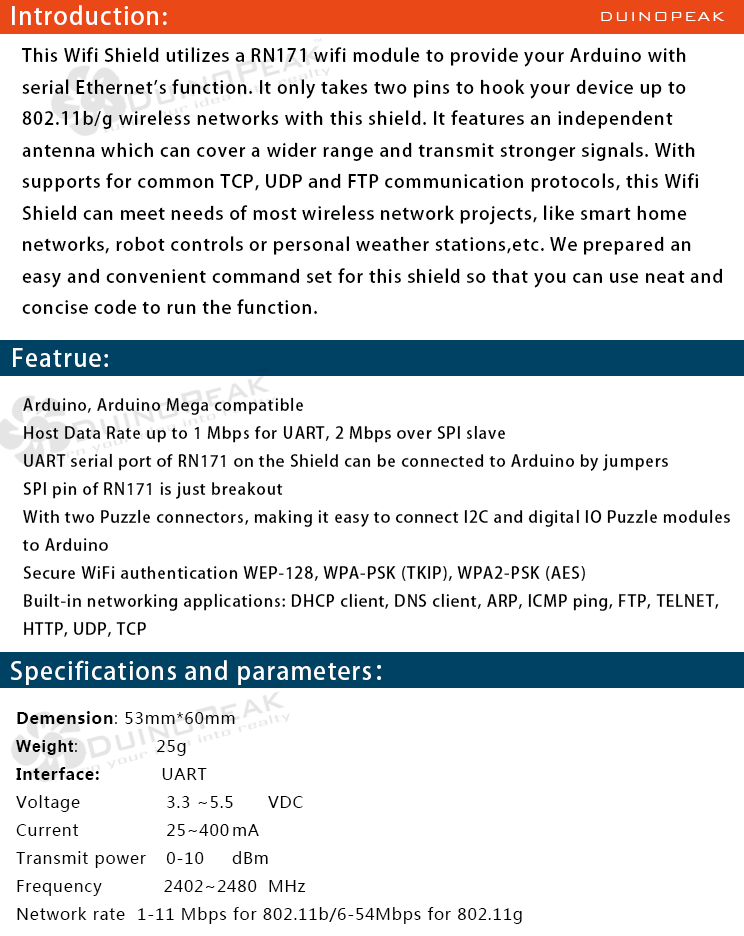
<style>
.page{position:relative;width:744px;height:936px;background:#ffffff}
.page>*{position:absolute;margin:0}
.t1{font:24px "AdobeHeitiStd-Regular";letter-spacing:0.05em;color:#ffffff}
.t2{font:18px "BankGothicBT-Light";letter-spacing:0.05em;color:#ffffff}
.t3{font:18px "AdobeHeitiStd-Regular";letter-spacing:0.05em;color:#000000}
.t4{font:16px "AdobeHeitiStd-Regular";letter-spacing:0.05em;color:#000000}
.t5{font:16px "MicrosoftYaHei";letter-spacing:0.05em;color:#000000}
.t6{font:16px "MicrosoftYaHei-Bold";letter-spacing:0.05em;color:#000000}
.t7{font:16px "Arial-BoldMT";letter-spacing:0.05em;color:#000000}
</style>
<div class="page">
<p class="t1" style="left:12px;top:5px;width:155px;height:20px">Introduction:</p>
<p class="t2" style="left:601px;top:12px;width:124px;height:9px">DUINOPEAK</p>
<p class="t3" style="left:21px;top:47px;width:701px;height:267px">This Wifi Shield utilizes a RN171 wifi module to provide your Arduino with <br>serial Ethernet's function. It only takes two pins to hook your device up to <br>802.11b/g wireless networks with this shield. It features an independent <br>antenna which can cover a wider range and transmit stronger signals. With <br>supports for common TCP, UDP and FTP communication protocols, this Wifi <br>Shield can meet needs of most wireless network projects, like smart home <br>networks, robot controls or personal weather stations,etc. We prepared an <br>easy and convenient command set for this shield so that you can use neat and <br>concise code to run the function.</p>
<p class="t1" style="left:13px;top:348px;width:95px;height:19px">Featrue:</p>
<p class="t4" style="left:22px;top:397px;width:708px;height:240px">Arduino, Arduino Mega compatible <br>Host Data Rate up to 1 Mbps for UART, 2 Mbps over SPI slave <br>UART serial port of RN171 on the Shield can be connected to Arduino by jumpers<br>SPI pin of RN171 is just breakout<br>With two Puzzle connectors, making it easy to connect I2C and digital IO Puzzle modules <br>to Arduino<br>Secure WiFi authentication WEP-128, WPA-PSK (TKIP), WPA2-PSK (AES)<br>Built-in networking applications: DHCP client, DNS client, ARP, ICMP ping, FTP, TELNET, <br>HTTP, UDP, TCP</p>
<p class="t1" style="left:11px;top:660px;width:370px;height:25px">Specifications and parameters：</p>
<p class="t5" style="left:16px;top:711px;width:506px;height:213px"><span class="t6">Demension</span>: 53mm*60mm<br><span class="t7">Weight</span>:              25g<br><span class="t6">Interface:           </span>UART<br>Voltage               3.3 ~5.5 VDC<br>Current               25~400 mA<br>Transmit power  0-10 dBm<br>Frequency        2402~2480 MHz<br>Network rate  1-11 Mbps for 802.11b/6-54Mbps for 802.11g</p>
</div>
